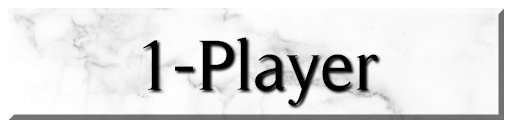
<style>
.page{position:relative;width:512px;height:128px}
.page>*{position:absolute;margin:0}
.t1{font:72px "Timeless-Normal";color:#000000}
</style>
<div class="page">
<p class="t1" style="left:142px;top:37px;width:236px;height:69px">1-Player</p>
</div>
